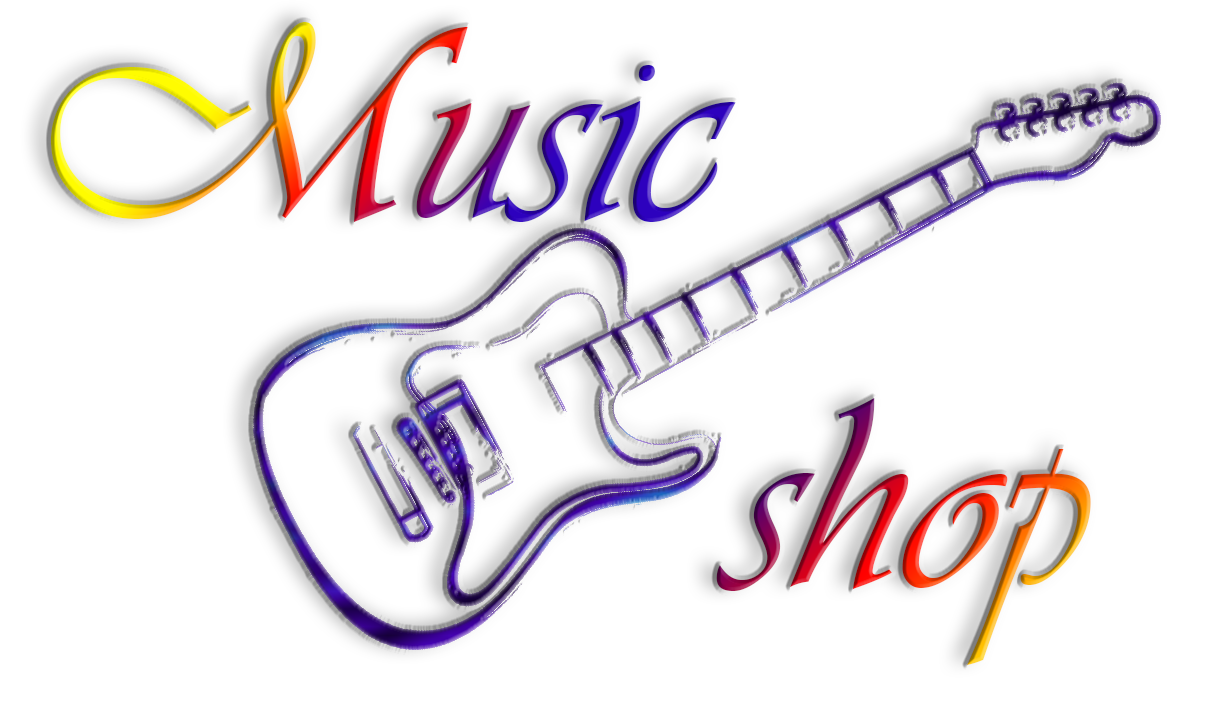
<style>
.page{position:relative;width:1226px;height:704px;background:#ffffff}
.page>*{position:absolute;margin:0}
.t1{font:272.4px "1Vivaldi"}
</style>
<div class="page">
<p class="t1" style="left:50px;top:22px;width:686px;height:200px">Music</p>
<p class="t1" style="left:716px;top:398px;width:375px;height:267px">shop</p>
</div>
